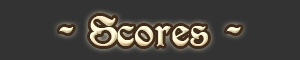
<style>
.page{position:relative;width:300px;height:60px;background:#333333}
.page>*{position:absolute;margin:0}
.t1{font:30px "PerryGothic"}
</style>
<div class="page">
<p class="t1" style="left:59px;top:16px;width:182px;height:31px">- Scores -</p>
</div>
